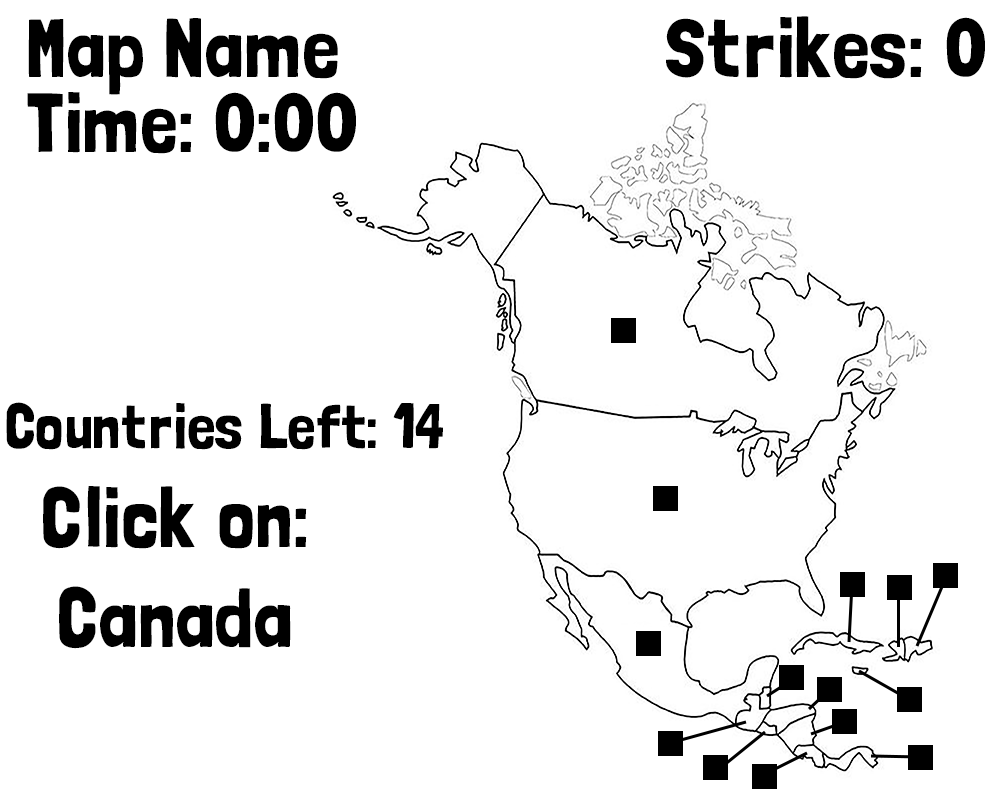
<style>
.page{position:relative;width:1000px;height:800px;background:#ffffff}
.page>*{position:absolute;margin:0}
.t1{font:83.3px "LondrinaSolid-Regular";color:#000000}
.t2{font:62.5px "LondrinaSolid-Regular";color:#000000}
</style>
<div class="page">
<p class="t1" style="left:666px;top:16px;width:319px;height:63px">Strikes: 0</p>
<p class="t1" style="left:28px;top:18px;width:310px;height:77px">Map Name</p>
<p class="t1" style="left:27px;top:92px;width:329px;height:62px">Time: 0:00</p>
<p class="t2" style="left:6px;top:402px;width:437px;height:48px">Countries Left: 14</p>
<p class="t1" style="left:43px;top:486px;width:264px;height:163px;text-align:center">Click on: <br>Canada</p>
</div>
